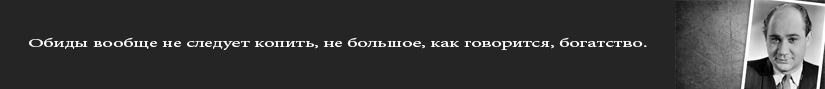
<style>
.page{position:relative;width:825px;height:89px;background:#252525}
.page>*{position:absolute;margin:0}
.t1{font:12.2px "MinionPro-Regular";color:#fefefe;scale:1.64 1}
</style>
<div class="page">
<p class="t1" style="left:29px;top:37px;width:618px;height:13px">Обиды вообще не следует копить, не большое, как говорится, богатство.</p>
</div>
